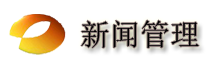
<style>
.page{position:relative;width:215px;height:69px;background:#ffffff}
.page>*{position:absolute;margin:0}
.t1{font:30px "SimSun";color:#000000}
</style>
<div class="page">
<p class="t1" style="left:81px;top:20px;width:118px;height:28px">新闻管理</p>
</div>
